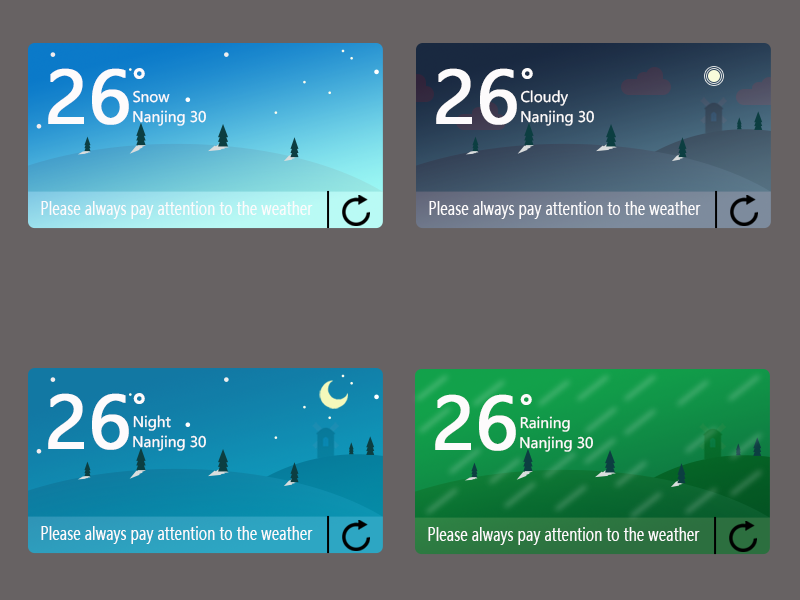
<style>
.page{position:relative;width:800px;height:600px;background:#676263}
.page>*{position:absolute;margin:0}
.t1{font:70.8px "MicrosoftYaHei";color:#fdfbfc;font-weight:bold}
.t2{font:44.2px "MicrosoftYaHei";color:#fdfbfc}
.t3{font:14.2px "MicrosoftYaHei";color:#fdfbfc}
.t4{font:17.9px "MicrosoftYaHei";color:#fdfbfc;scale:0.74 1}
</style>
<div class="page">
<p class="t1" style="left:48px;top:68px;width:81px;height:57px">26</p>
<p class="t2" style="left:133px;top:68px;width:12px;height:11px">。</p>
<p class="t1" style="left:436px;top:68px;width:81px;height:57px">26</p>
<p class="t2" style="left:521px;top:68px;width:12px;height:11px">。</p>
<p class="t3" style="left:133px;top:90px;width:37px;height:13px">Snow</p>
<p class="t3" style="left:521px;top:90px;width:47px;height:16px">Cloudy</p>
<p class="t3" style="left:133px;top:110px;width:73px;height:16px">Nanjing 30</p>
<p class="t3" style="left:521px;top:110px;width:73px;height:16px">Nanjing 30</p>
<p class="t4" style="left:41px;top:201px;width:272px;height:18px">Please always pay attention to the weather</p>
<p class="t4" style="left:429px;top:201px;width:272px;height:18px">Please always pay attention to the weather</p>
<p class="t1" style="left:48px;top:393px;width:81px;height:57px">26</p>
<p class="t2" style="left:133px;top:393px;width:12px;height:11px">。</p>
<p class="t1" style="left:435px;top:394px;width:81px;height:57px">26</p>
<p class="t2" style="left:520px;top:394px;width:12px;height:11px">。</p>
<p class="t3" style="left:133px;top:415px;width:38px;height:16px">Night</p>
<p class="t3" style="left:520px;top:416px;width:50px;height:16px">Raining</p>
<p class="t3" style="left:133px;top:435px;width:73px;height:16px">Nanjing 30</p>
<p class="t3" style="left:520px;top:436px;width:73px;height:16px">Nanjing 30</p>
<p class="t4" style="left:41px;top:526px;width:272px;height:18px">Please always pay attention to the weather</p>
<p class="t4" style="left:428px;top:527px;width:272px;height:18px">Please always pay attention to the weather</p>
</div>
